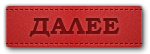
<style>
.page{position:relative;width:150px;height:54px}
.page>*{position:absolute;margin:0}
.t1{font:24px "BookmanOldStyle-Bold";color:#6f0f0f}
</style>
<div class="page">
<p class="t1" style="left:29px;top:18px;width:91px;height:19px">ДАЛЕЕ</p>
</div>
